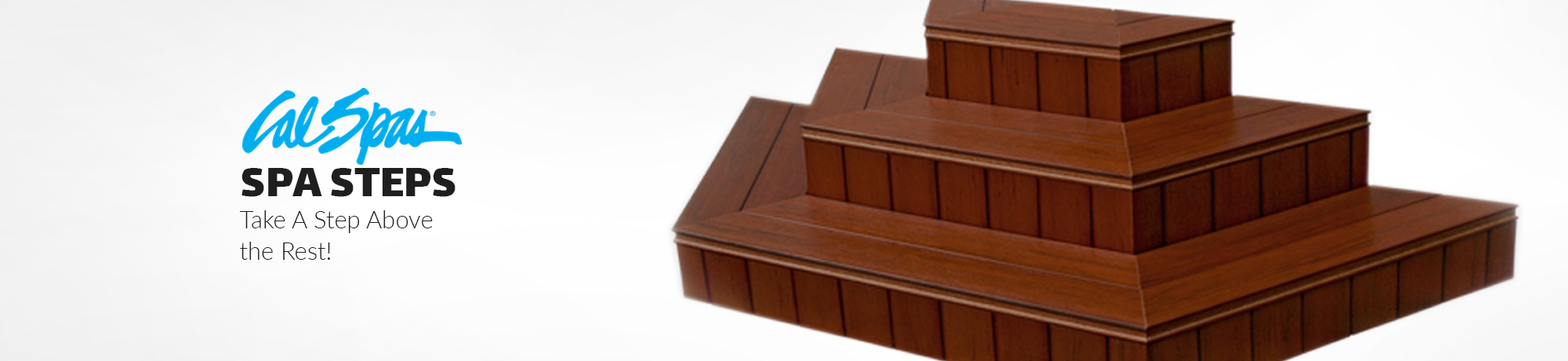
<style>
.page{position:relative;width:1568px;height:361px}
.page>*{position:absolute;margin:0}
.t1{font:49.6px "Lalezar-Regular";color:#1f1f1f}
.t2{font:24.3px/31.7px "Lato-Light";color:#1f1f1f}
</style>
<div class="page">
<p class="t1" style="left:241px;top:168px;width:215px;height:29px">SPA STEPS</p>
<p class="t2" style="left:239px;top:210px;width:194px;height:50px">Take A Step Above <br>the Rest!</p>
</div>
